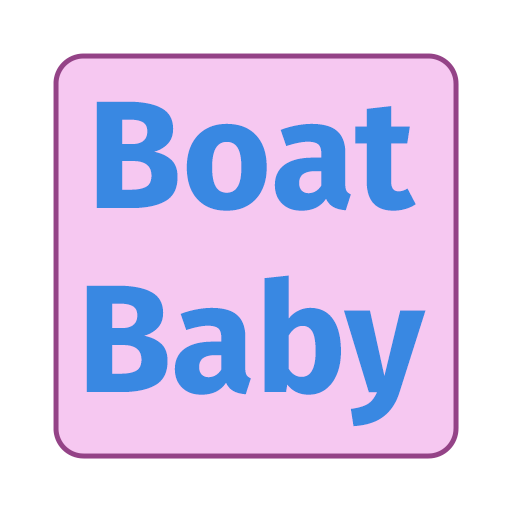
<style>
.page{position:relative;width:512px;height:512px;background:#f6c8f1}
.page>*{position:absolute;margin:0}
.t1{font:153.3px "FiraSans-Bold";color:#3988e2}
</style>
<div class="page">
<p class="t1" style="left:86px;top:101px;width:340px;height:326px;text-align:center">Boat<br>Baby</p>
</div>
